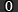
<style>
.page{position:relative;width:18px;height:12px;background:#333333}
.page>*{position:absolute;margin:0}
.t1{font:17px "Perpetua-Bold";color:#ffffff}
</style>
<div class="page">
<p class="t1" style="left:5px;top:1px;width:8px;height:10px">0</p>
</div>
